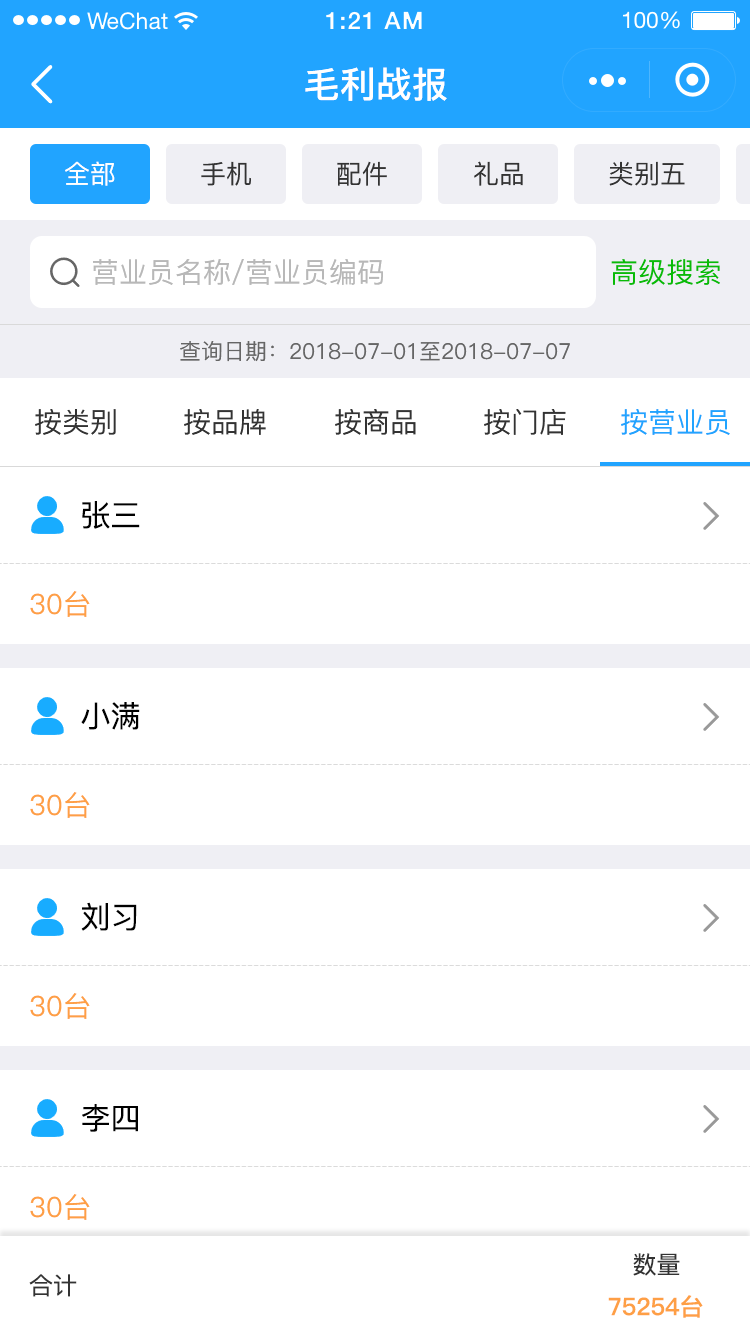
<style>
.page{position:relative;width:750px;height:1334px;background:#ffffff}
.page>*{position:absolute;margin:0}
.t1{font:36px "PingFang-SC-Bold";color:#ffffff}
.t2{font:26px "PingFang-SC-Medium";color:#ffffff}
.t3{font:26px "PingFang-SC-Medium";color:#333333}
.t4{font:28px "PingFang-SC-Medium";color:#b8b8b8}
.t5{font:28px "PingFang-SC-Medium";color:#09bb07}
.t6{font:22px "PingFang-SC-Medium";color:#666666}
.t7{font:28px "PingFang-SC-Medium";color:#333333}
.t8{font:28px "PingFang-SC-Medium";color:#21a4ff}
.t9{font:30px "PingFang-SC-Medium";color:#000000}
.t10{font:28px "PingFang-SC-Medium";color:#fe9f45}
.t11{font:24px "PingFang-SC-Medium";color:#333333}
.t12{font:24px "PingFang-SC-Bold";color:#fe9f45}
</style>
<div class="page">
<p class="t1" style="left:305px;top:67px;width:142px;height:34px">毛利战报</p>
<p class="t2" style="left:65px;top:161px;width:50px;height:25px">全部</p>
<p class="t3" style="left:201px;top:161px;width:50px;height:25px">手机</p>
<p class="t3" style="left:337px;top:161px;width:50px;height:25px">配件</p>
<p class="t3" style="left:474px;top:161px;width:49px;height:25px">礼品</p>
<p class="t3" style="left:609px;top:161px;width:76px;height:25px">类别五</p>
<p class="t4" style="left:93px;top:259px;width:290px;height:26px">营业员名称/营业员编码</p>
<p class="t5" style="left:611px;top:259px;width:109px;height:26px">高级搜索</p>
<p class="t6" style="left:180px;top:341px;width:390px;height:21px">查询日期：2018-07-01至2018-07-07</p>
<p class="t7" style="left:35px;top:409px;width:81px;height:26px">按类别</p>
<p class="t7" style="left:184px;top:409px;width:82px;height:26px">按品牌</p>
<p class="t7" style="left:335px;top:409px;width:81px;height:26px">按商品</p>
<p class="t7" style="left:484px;top:409px;width:82px;height:26px">按门店</p>
<p class="t8" style="left:621px;top:409px;width:109px;height:26px">按营业员</p>
<p class="t9" style="left:82px;top:501px;width:58px;height:28px">张三</p>
<p class="t10" style="left:30px;top:591px;width:60px;height:26px">30台</p>
<p class="t9" style="left:81px;top:702px;width:59px;height:28px">小满</p>
<p class="t10" style="left:30px;top:792px;width:60px;height:26px">30台</p>
<p class="t9" style="left:81px;top:902px;width:56px;height:29px">刘习</p>
<p class="t10" style="left:30px;top:993px;width:60px;height:26px">30台</p>
<p class="t9" style="left:82px;top:1104px;width:56px;height:28px">李四</p>
<p class="t10" style="left:30px;top:1194px;width:60px;height:26px">30台</p>
<p class="t11" style="left:633px;top:1253px;width:47px;height:23px">数量</p>
<p class="t11" style="left:29px;top:1274px;width:48px;height:23px">合计</p>
<p class="t12" style="left:608px;top:1295px;width:95px;height:23px">75254台</p>
</div>
